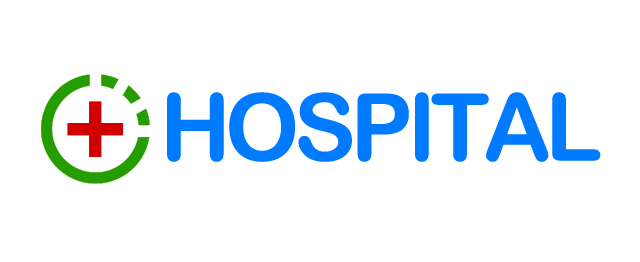
<style>
.page{position:relative;width:640px;height:262px;background:#ffffff}
.page>*{position:absolute;margin:0}
.t1{font:93.5px "ArialRoundedMTBold";letter-spacing:-0.06em;color:#007bff}
</style>
<div class="page">
<p class="t1" style="left:167px;top:92px;width:434px;height:70px">HOSPITAL</p>
</div>
